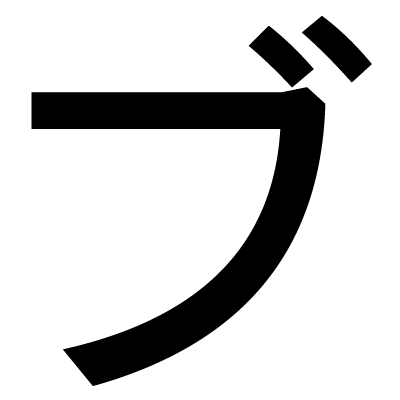
<style>
.page{position:relative;width:400px;height:400px;background:#ffffff}
.page>*{position:absolute;margin:0}
.t1{font:424.8px "MS-PGothic";color:#000000}
</style>
<div class="page">
<p class="t1" style="left:31px;top:15px;width:341px;height:371px">ブ</p>
</div>
